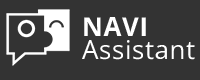
<style>
.page{position:relative;width:200px;height:80px;background:#333333}
.page>*{position:absolute;margin:0}
.t1{font:25.8px/23.5px "OpenSans-Regular";letter-spacing:0.025em;color:#ffffff}
.t2{font:25.8px/23.5px "OpenSans-Bold";letter-spacing:0.025em;color:#ffffff}
</style>
<div class="page">
<p class="t1" style="left:82px;top:17px;width:113px;height:43px"><span class="t2">NAVI<br></span>Assistant</p>
</div>
